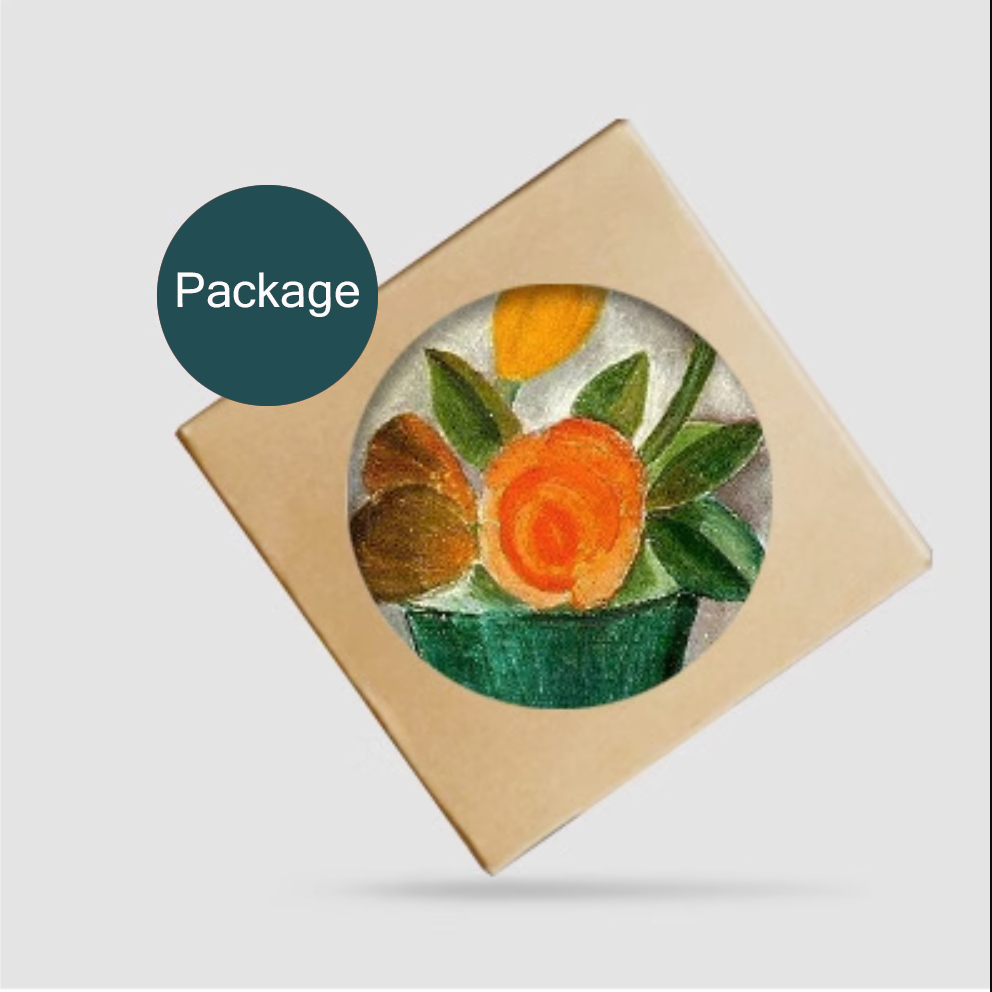
<style>
.page{position:relative;width:992px;height:992px;background:#e4e4e4}
.page>*{position:absolute;margin:0}
.t1{font:48px "MicrosoftSansSerif";color:#fcfafa}
</style>
<div class="page">
<p class="t1" style="left:177px;top:272px;width:182px;height:45px">Package</p>
</div>
